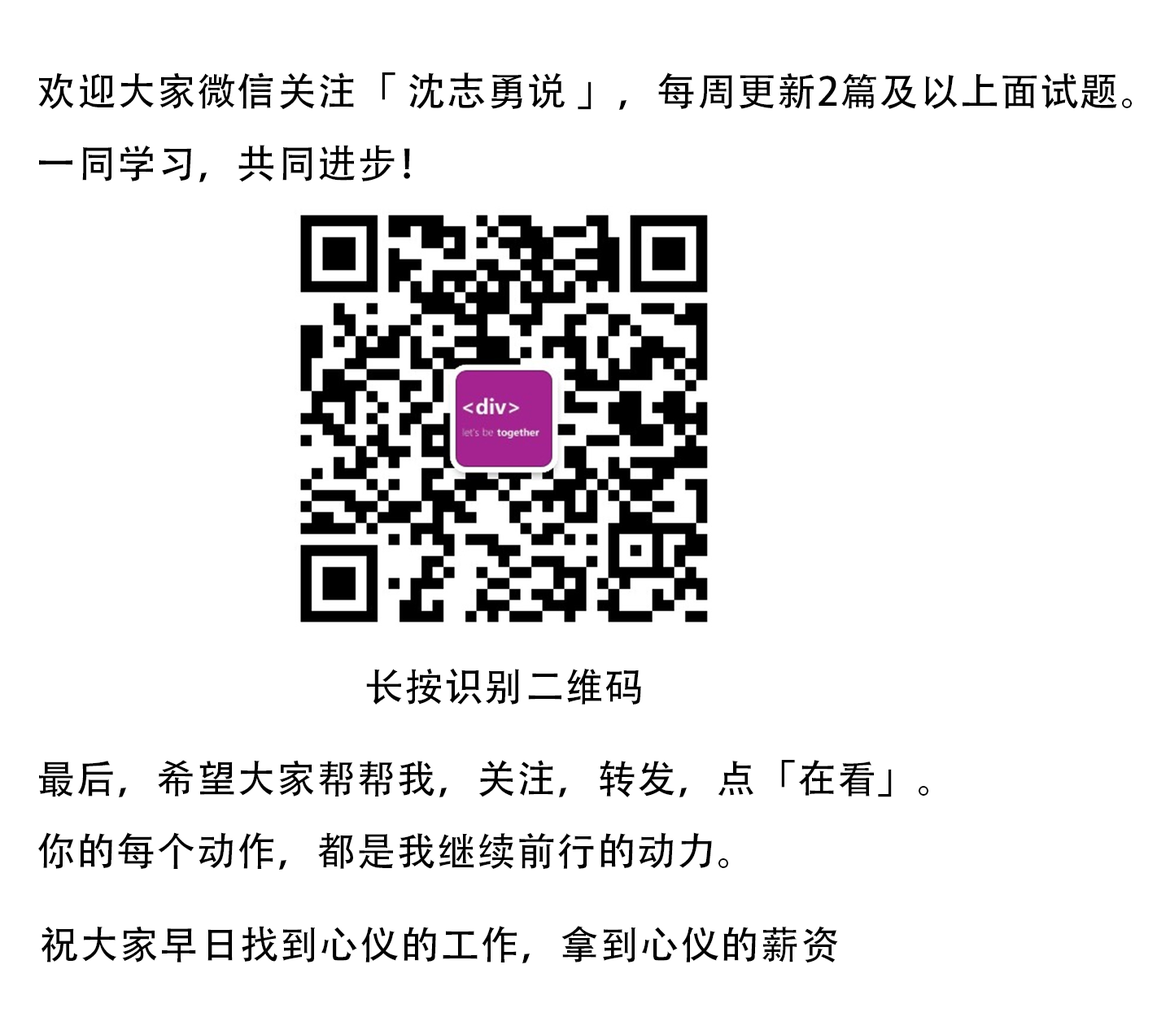
<style>
.page{position:relative;width:1157px;height:1030px;background:#ffffff}
.page>*{position:absolute;margin:0}
.t1{font:39.1px/72.4px "AdobeHeitiStd-Regular";letter-spacing:0.025em;color:#000000}
.t2{font:39.1px "AdobeHeitiStd-Regular";letter-spacing:0.025em;color:#000000}
</style>
<div class="page">
<p class="t1" style="left:38px;top:72px;width:1094px;height:110px">欢迎大家微信关注「 沈志勇说 」，每周更新2篇及以上面试题。<br>一同学习，共同进步！</p>
<p class="t2" style="left:366px;top:668px;width:275px;height:37px">长按识别二维码</p>
<p class="t1" style="left:38px;top:760px;width:891px;height:110px">最后，希望大家帮帮我，关注，转发，点「在看」。<br>你的每个动作，都是我继续前行的动力。</p>
<p class="t2" style="left:42px;top:926px;width:796px;height:38px">祝大家早日找到心仪的工作，拿到心仪的薪资</p>
</div>
